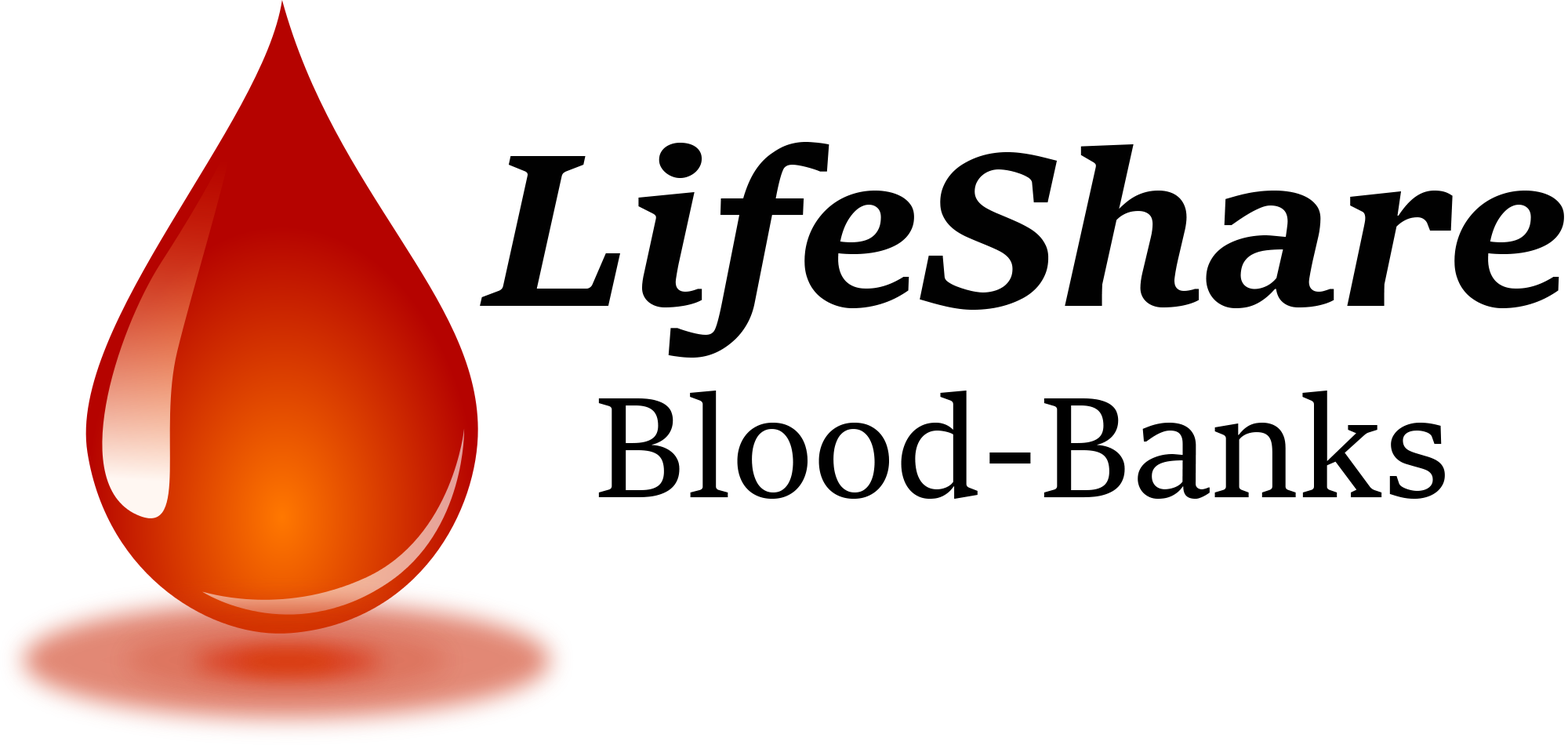
<style>
.page{position:relative;width:1568px;height:745px;background:#ffffff}
.page>*{position:absolute;margin:0}
.t1{font:235.2px "SitkaText-BoldItalic";color:#010101}
.t2{font:156.8px "SitkaSubheading";color:#000000}
</style>
<div class="page">
<p class="t1" style="left:480px;top:142px;width:1084px;height:216px">LifeShare</p>
<p class="t2" style="left:598px;top:390px;width:847px;height:109px">Blood-Banks</p>
</div>
